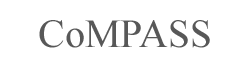
<style>
.page{position:relative;width:247px;height:58px;background:#ffffff}
.page>*{position:absolute;margin:0}
.t1{font:40px "TimesNewRomanPSMT";color:#585858}
</style>
<div class="page">
<p class="t1" style="left:39px;top:20px;width:171px;height:28px">CoMPASS</p>
</div>
